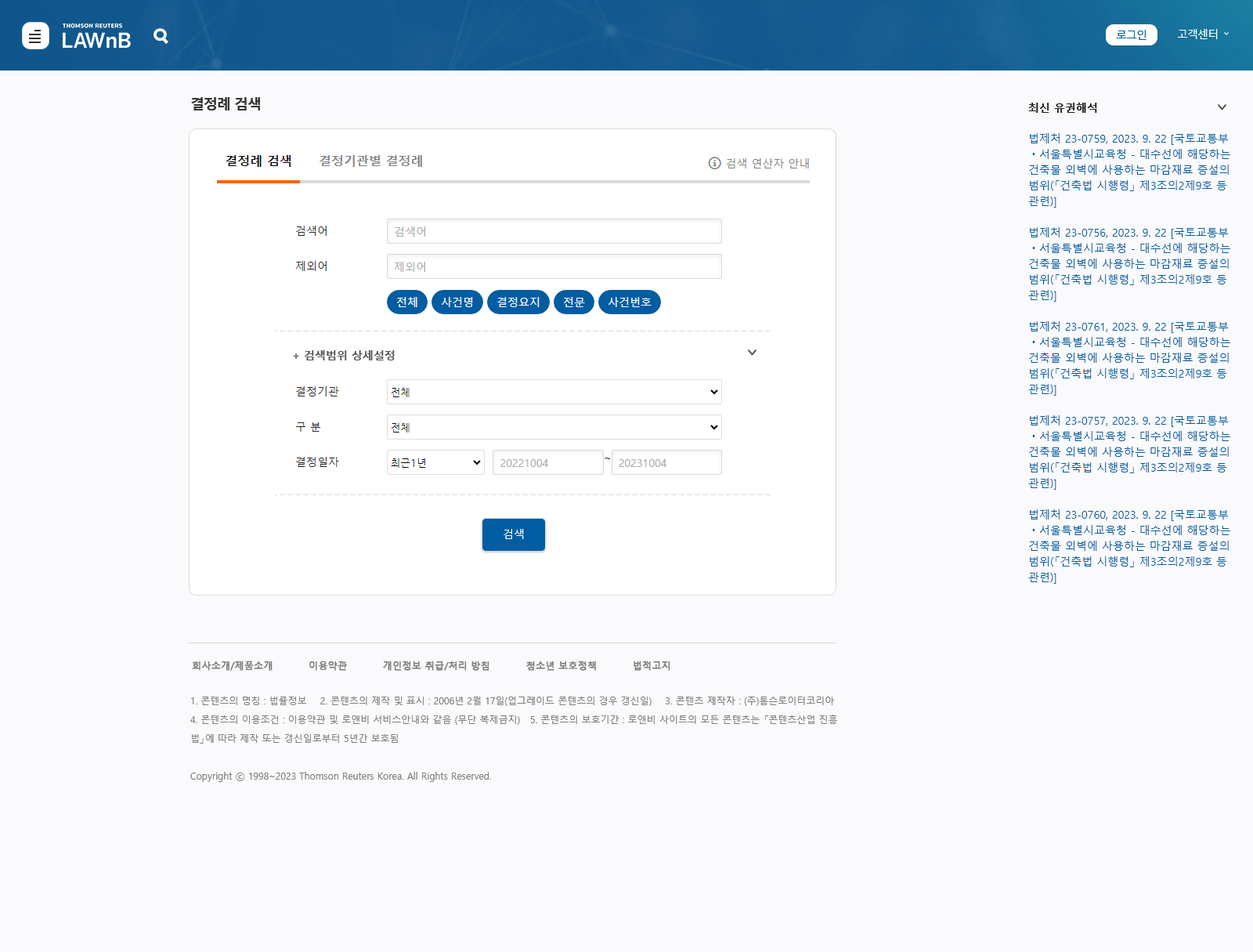
<style>
.page{position:relative;width:1253px;height:952px;background:#fafafc}
.page>*{position:absolute;margin:0}
.t1{font:14.1px "MalgunGothicBold";letter-spacing:-0.06em;color:#333333}
.t2{font:11px "MalgunGothicBold";color:#212121}
.t3{font:11px/15.7px "MalgunGothic";color:#005da2}
.t4{font:11px "MalgunGothicBold";color:#585858}
.t5{font:11px "MalgunGothic";color:#ffffff}
.t6{font:9.4px "MalgunGothic";color:#7f7f7f;font-weight:bold}
.t7{font:9.4px/18.8px "MalgunGothic";color:#7f7f7f}
</style>
<div class="page">
<p class="t1" style="left:191px;top:97px;width:69px;height:13px">결정례 검색</p>
<p class="t2" style="left:1028px;top:103px;width:69px;height:10px">최신 유권해석</p>
<p class="t3" style="left:1028px;top:133px;width:202px;height:450px">법제처 23-0759, 2023. 9. 22 [국토교통부ㆍ서울특별시교육청 - 대수선에 해당하는 건축물 외벽에 사용하는 마감재료 증설의 범위(「건축법 시행령」 제3조의2제9호 등 관련)]<br><br>법제처 23-0756, 2023. 9. 22 [국토교통부ㆍ서울특별시교육청 - 대수선에 해당하는 건축물 외벽에 사용하는 마감재료 증설의 범위(「건축법 시행령」 제3조의2제9호 등 관련)]<br><br>법제처 23-0761, 2023. 9. 22 [국토교통부ㆍ서울특별시교육청 - 대수선에 해당하는 건축물 외벽에 사용하는 마감재료 증설의 범위(「건축법 시행령」 제3조의2제9호 등 관련)]<br><br>법제처 23-0757, 2023. 9. 22 [국토교통부ㆍ서울특별시교육청 - 대수선에 해당하는 건축물 외벽에 사용하는 마감재료 증설의 범위(「건축법 시행령」 제3조의2제9호 등 관련)]<br><br>법제처 23-0760, 2023. 9. 22 [국토교통부ㆍ서울특별시교육청 - 대수선에 해당하는 건축물 외벽에 사용하는 마감재료 증설의 범위(「건축법 시행령」 제3조의2제9호 등 관련)]</p>
<p class="t4" style="left:293px;top:350px;width:102px;height:10px">+ 검색범위 상세설정</p>
<p class="t5" style="left:504px;top:529px;width:20px;height:10px">검색</p>
<p class="t6" style="left:192px;top:660px;width:478px;height:10px">회사소개/제품소개          이용약관          개인정보 취급/처리 방침          청소년 보호정책          법적고지</p>
<p class="t7" style="left:190px;top:696px;width:647px;height:86px">1. 콘텐츠의 명칭 : 법률정보    2. 콘텐츠의 제작 및 표시 : 2006년 2월 17일(업그레이드 콘텐츠의 경우 갱신일)    3. 콘텐츠 제작자 : (주)톰슨로이터코리아    <br>4. 콘텐츠의 이용조건 : 이용약관 및 로앤비 서비스안내와 같음 (무단 복제금지)   5. 콘텐츠의 보호기간 : 로앤비 사이트의 모든 콘텐츠는 「콘텐츠산업 진흥<br>법」에 따라 제작 또는 갱신일로부터 5년간 보호됨<br><br>Copyright ⓒ 1998~2023 Thomson Reuters Korea. All Rights Reserved.</p>
</div>
